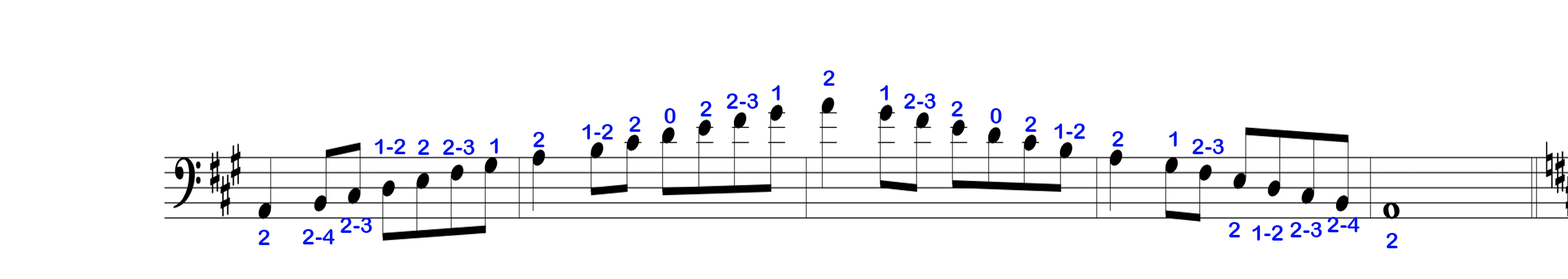
<style>
.page{position:relative;width:1568px;height:279px;background:#ffffff}
.page>*{position:absolute;margin:0}
.t1{font:21.8px "ArialRoundedMTBold";color:#0417ec}
</style>
<div class="page">
<p class="t1" style="left:823px;top:70px;width:12px;height:16px">2</p>
<p class="t1" style="left:772px;top:85px;width:8px;height:16px">1</p>
<p class="t1" style="left:880px;top:85px;width:8px;height:16px">1</p>
<p class="t1" style="left:700px;top:101px;width:12px;height:16px">2</p>
<p class="t1" style="left:726px;top:94px;width:32px;height:15px">2-3</p>
<p class="t1" style="left:904px;top:94px;width:32px;height:15px">2-3</p>
<p class="t1" style="left:951px;top:101px;width:12px;height:16px">2</p>
<p class="t1" style="left:664px;top:108px;width:12px;height:16px">0</p>
<p class="t1" style="left:990px;top:108px;width:12px;height:16px">0</p>
<p class="t1" style="left:582px;top:124px;width:31px;height:16px">1-2</p>
<p class="t1" style="left:629px;top:117px;width:12px;height:15px">2</p>
<p class="t1" style="left:1025px;top:117px;width:11px;height:15px">2</p>
<p class="t1" style="left:1054px;top:124px;width:31px;height:15px">1-2</p>
<p class="t1" style="left:533px;top:132px;width:11px;height:15px">2</p>
<p class="t1" style="left:1112px;top:131px;width:11px;height:16px">2</p>
<p class="t1" style="left:1169px;top:131px;width:8px;height:16px">1</p>
<p class="t1" style="left:375px;top:139px;width:30px;height:15px">1-2</p>
<p class="t1" style="left:418px;top:140px;width:11px;height:15px">2</p>
<p class="t1" style="left:443px;top:140px;width:32px;height:15px">2-3</p>
<p class="t1" style="left:490px;top:138px;width:8px;height:16px">1</p>
<p class="t1" style="left:1192px;top:139px;width:32px;height:15px">2-3</p>
<p class="t1" style="left:340px;top:218px;width:32px;height:15px">2-3</p>
<p class="t1" style="left:1327px;top:217px;width:33px;height:16px">2-4</p>
<p class="t1" style="left:258px;top:230px;width:12px;height:15px">2</p>
<p class="t1" style="left:302px;top:229px;width:33px;height:16px">2-4</p>
<p class="t1" style="left:1229px;top:222px;width:11px;height:16px">2</p>
<p class="t1" style="left:1252px;top:225px;width:31px;height:16px">1-2</p>
<p class="t1" style="left:1290px;top:222px;width:32px;height:16px">2-3</p>
<p class="t1" style="left:1386px;top:233px;width:12px;height:16px">2</p>
</div>
